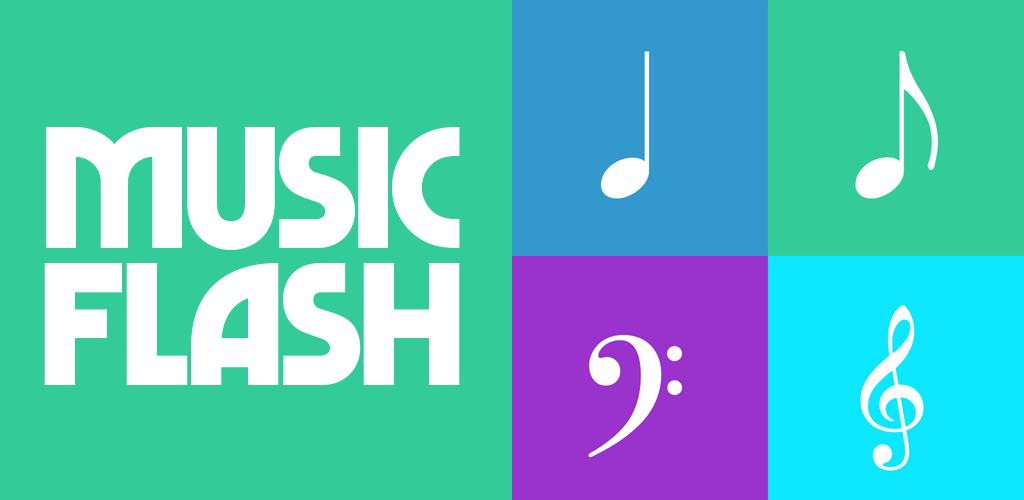
<style>
.page{position:relative;width:1024px;height:500px;background:#33cc99}
.page>*{position:absolute;margin:0}
.t1{font:174.9px "MarvinVisions-Bold";color:#ffffff}
.t2{font:177.5px "MarvinVisions-Bold";color:#ffffff}
</style>
<div class="page">
<p class="t1" style="left:46px;top:127px;width:414px;height:123px">Music</p>
<p class="t2" style="left:44px;top:263px;width:416px;height:122px">Flash</p>
</div>
